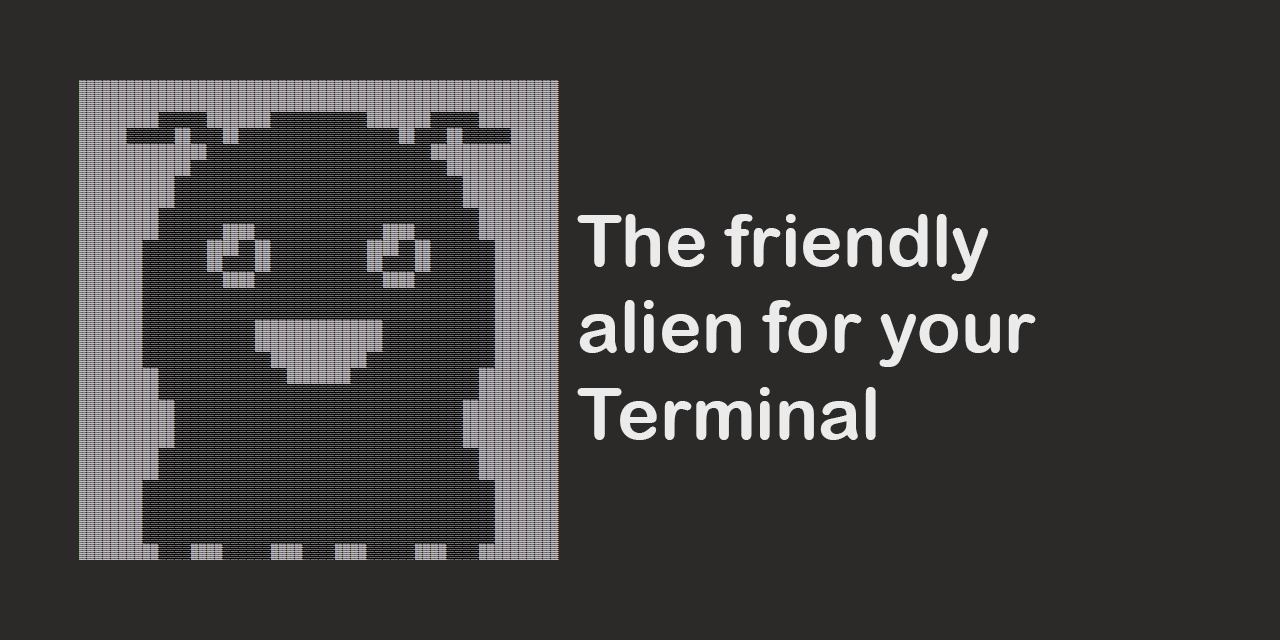
<style>
.page{position:relative;width:1280px;height:640px;background:#2c2a29}
.page>*{position:absolute;margin:0}
.t1{font:72px "ArialRoundedMTBold";color:#ebebeb}
</style>
<div class="page">
<p class="t1" style="left:577px;top:214px;width:459px;height:226px">The friendly <br>alien for your<br>Terminal</p>
</div>
